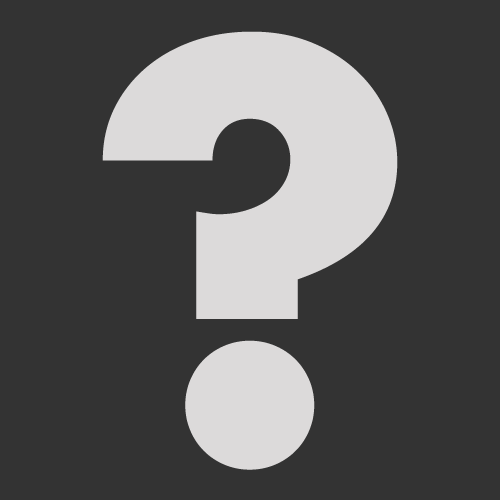
<style>
.page{position:relative;width:500px;height:500px;background:#333333}
.page>*{position:absolute;margin:0}
.t1{font:550px "Futura-Bold";letter-spacing:-0.025em;color:#dcdada}
</style>
<div class="page">
<p class="t1" style="left:102px;top:31px;width:296px;height:439px">?</p>
</div>
